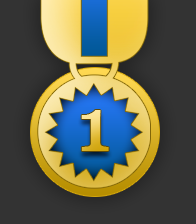
<style>
.page{position:relative;width:196px;height:224px;background:#333333}
.page>*{position:absolute;margin:0}
.t1{font:75px "Georgia";font-weight:bold}
</style>
<div class="page">
<p class="t1" style="left:81px;top:110px;width:28px;height:41px">1</p>
</div>
